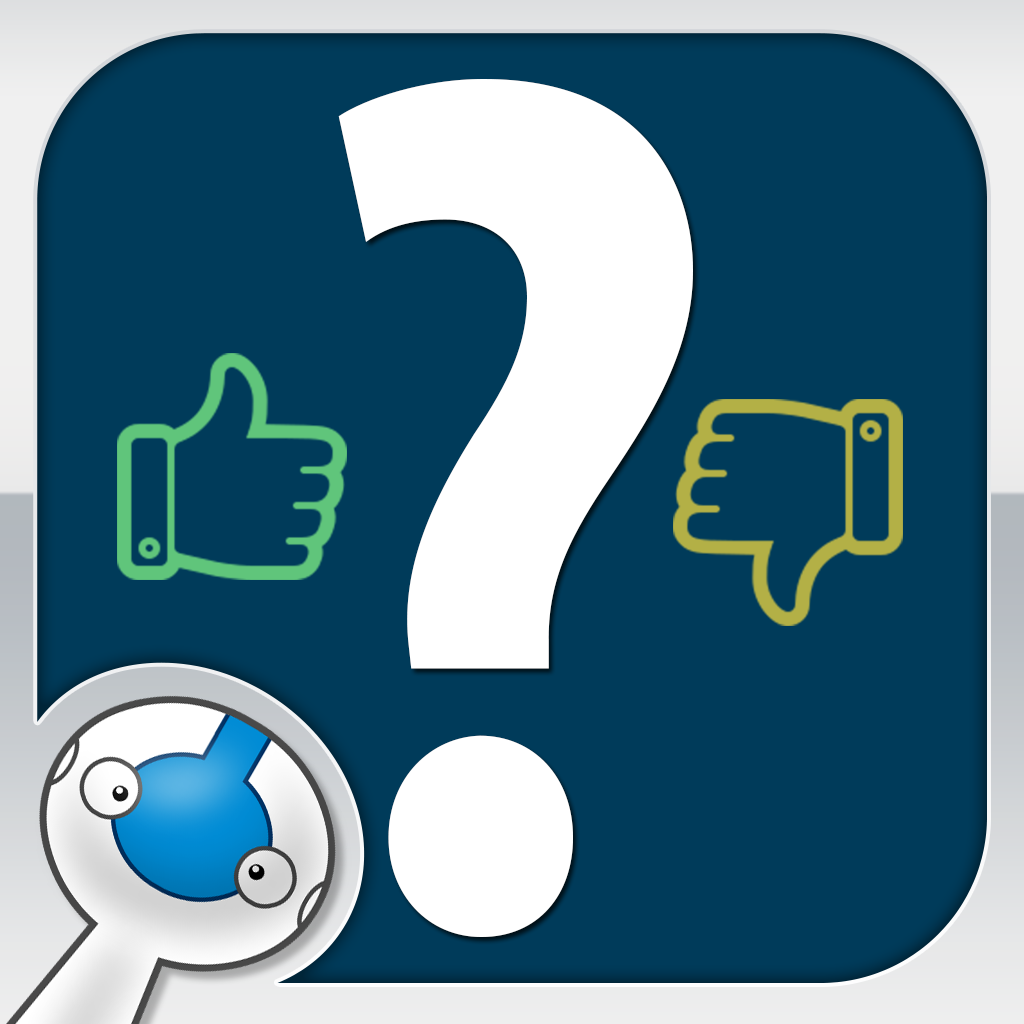
<style>
.page{position:relative;width:1024px;height:1024px;background:#003b5a}
.page>*{position:absolute;margin:0}
.t1{font:1242.9px "MyriadPro-BoldCond";color:#ffffff}
</style>
<div class="page">
<p class="t1" style="left:338px;top:79px;width:355px;height:858px">?</p>
</div>
